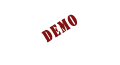
<style>
.page{position:relative;width:120px;height:65px;background:#ffffff}
.page>*{position:absolute;margin:0}
.t1{font:15.3px "StencilStd";letter-spacing:0.1em;color:#7f1212;scale:0.74 1}
</style>
<div class="page">
<p class="t1" style="left:41px;top:14px;width:36px;height:29px;rotate:-31deg">DEMO</p>
</div>
